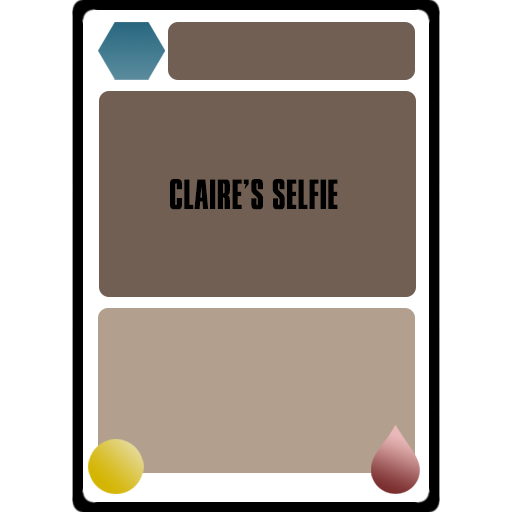
<style>
.page{position:relative;width:512px;height:512px;background:#ffffff}
.page>*{position:absolute;margin:0}
.t1{font:36px "PressGothic";letter-spacing:0.025em;color:#000000;text-transform:uppercase}
</style>
<div class="page">
<p class="t1" style="left:170px;top:179px;width:168px;height:31px">Claire’s selfie</p>
</div>
